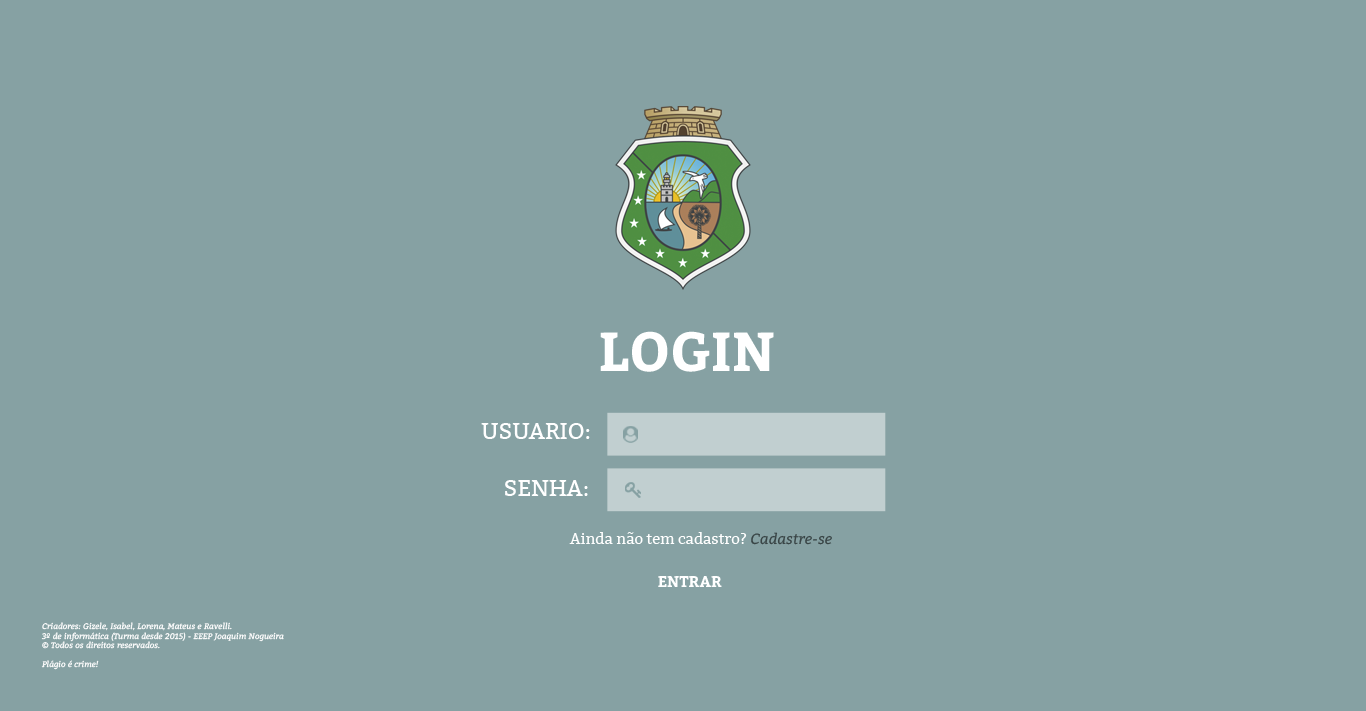
<style>
.page{position:relative;width:1366px;height:711px;background:#86a1a3}
.page>*{position:absolute;margin:0}
.t1{font:54.7px "Bitter-Bold";color:#ffffff}
.t2{font:22.5px "Bitter-Regular";color:#ffffff}
.t3{font:14.8px "Bitter-Regular";color:#ffffff}
.t4{font:14.8px "Bitter-Italic";color:#394546}
.t5{font:15.5px "Bitter-Bold";color:#ffffff}
.t6{font:8px "Bitter-Italic";color:#fffefe}
</style>
<div class="page">
<p class="t1" style="left:600px;top:331px;width:174px;height:41px">LOGIN</p>
<p class="t2" style="left:481px;top:423px;width:109px;height:16px">USUARIO:</p>
<p class="t2" style="left:505px;top:480px;width:83px;height:16px">SENHA:</p>
<p class="t3" style="left:569px;top:532px;width:263px;height:13px">Ainda não tem cadastro? <span class="t4">Cadastre-se</span></p>
<p class="t5" style="left:658px;top:576px;width:64px;height:11px">ENTRAR</p>
<p class="t6" style="left:41px;top:622px;width:243px;height:48px">Criadores: Gizele, Isabel, Lorena, Mateus e Ravelli.<br>3º de informática (Turma desde 2015) - EEEP Joaquim Nogueira<br>© Todos os direitos reservados.<br><br>Plágio é crime!</p>
</div>
